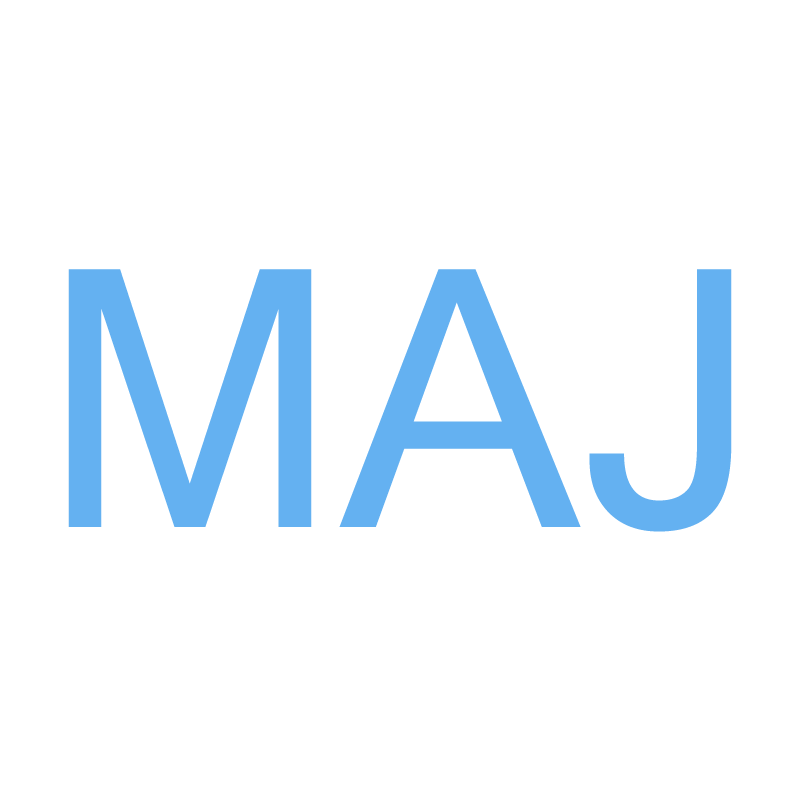
<style>
.page{position:relative;width:800px;height:800px;background:#ffffff}
.page>*{position:absolute;margin:0}
.t1{font:360px "MicrosoftSansSerif";color:#64b1f1}
</style>
<div class="page">
<p class="t1" style="left:68px;top:269px;width:664px;height:263px">MAJ</p>
</div>
